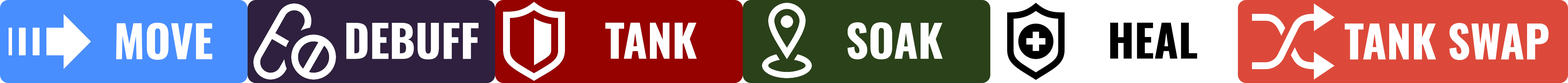
<style>
.page{position:relative;width:1568px;height:83px}
.page>*{position:absolute;margin:0}
.t1{font:75.6px "Oswald-Bold";color:#fefefe}
.t2{font:75.6px "Oswald-Bold";color:#ffffff}
.t3{font:75.6px "Oswald-Bold";color:#000000}
</style>
<div class="page">
<p class="t1" style="left:116px;top:22px;width:97px;height:37px">MOVE</p>
<p class="t2" style="left:346px;top:23px;width:133px;height:36px">DEBUFF</p>
<p class="t1" style="left:605px;top:22px;width:92px;height:36px">TANK</p>
<p class="t1" style="left:847px;top:22px;width:96px;height:37px">SOAK</p>
<p class="t3" style="left:1110px;top:22px;width:87px;height:36px">HEAL</p>
<p class="t2" style="left:1344px;top:23px;width:205px;height:37px">TANK SWAP</p>
</div>
